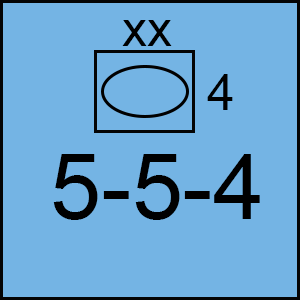
<style>
.page{position:relative;width:300px;height:300px;background:#74b4e4}
.page>*{position:absolute;margin:0}
.t1{font:50px "ArialMT";color:#000000}
.t2{font:91.7px "ArialMT";color:#000000}
</style>
<div class="page">
<p class="t1" style="left:122px;top:20px;width:50px;height:26px">xx</p>
<p class="t1" style="left:207px;top:74px;width:26px;height:36px">4</p>
<p class="t2" style="left:53px;top:154px;width:207px;height:66px">5-5-4</p>
</div>
